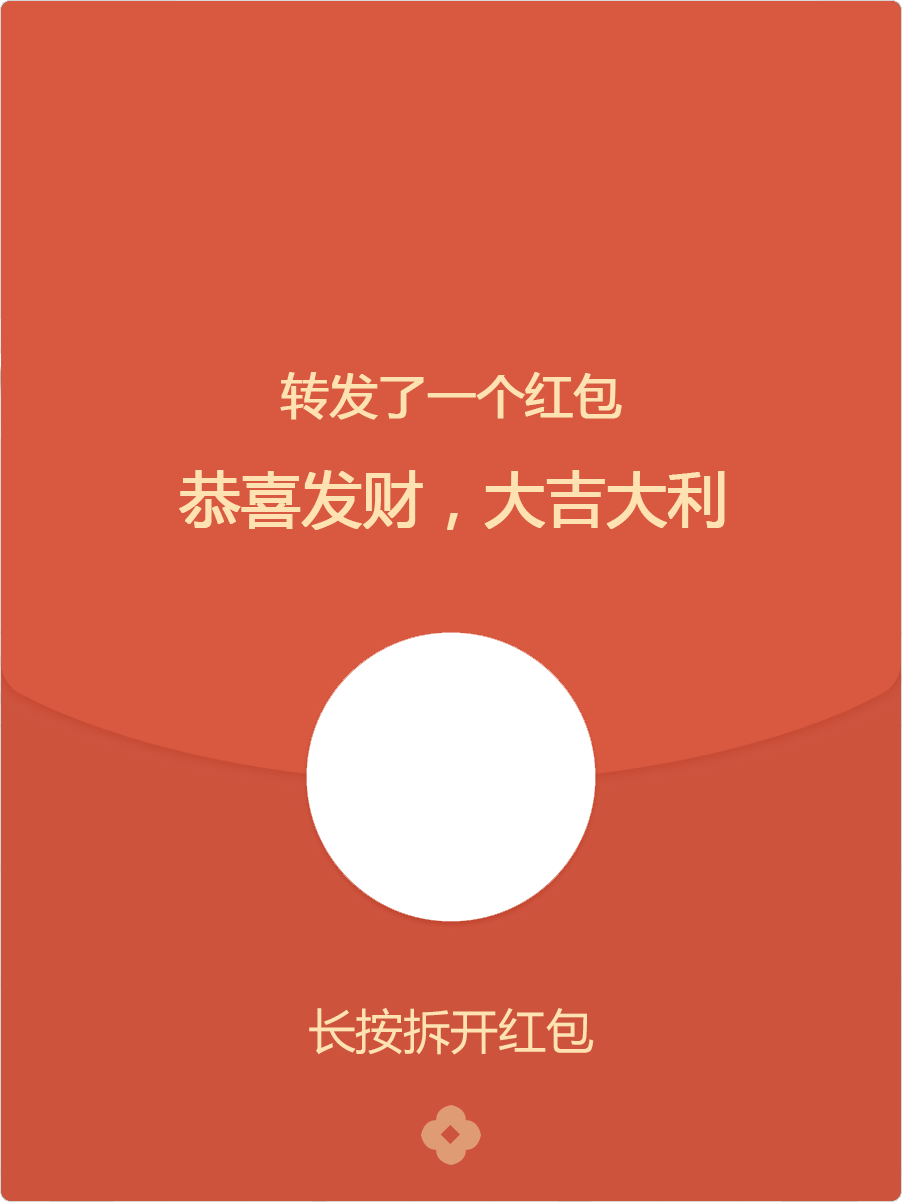
<style>
.page{position:relative;width:902px;height:1202px;background:#d85940}
.page>*{position:absolute;margin:0}
.t1{font:48px "MicrosoftYaHei";letter-spacing:-0.01em;color:#ffe2b1;font-weight:bold}
.t2{font:60px "MicrosoftYaHei";letter-spacing:-0.01em;color:#ffe2b1;font-weight:bold}
.t3{font:48px "MicrosoftYaHei";letter-spacing:-0.01em;color:#ffe2b1}
</style>
<div class="page">
<p class="t1" style="left:280px;top:372px;width:342px;height:48px">转发了一个红包</p>
<p class="t2" style="left:179px;top:470px;width:546px;height:60px">恭喜发财，大吉大利</p>
<p class="t3" style="left:309px;top:1007px;width:285px;height:48px">长按拆开红包</p>
</div>
